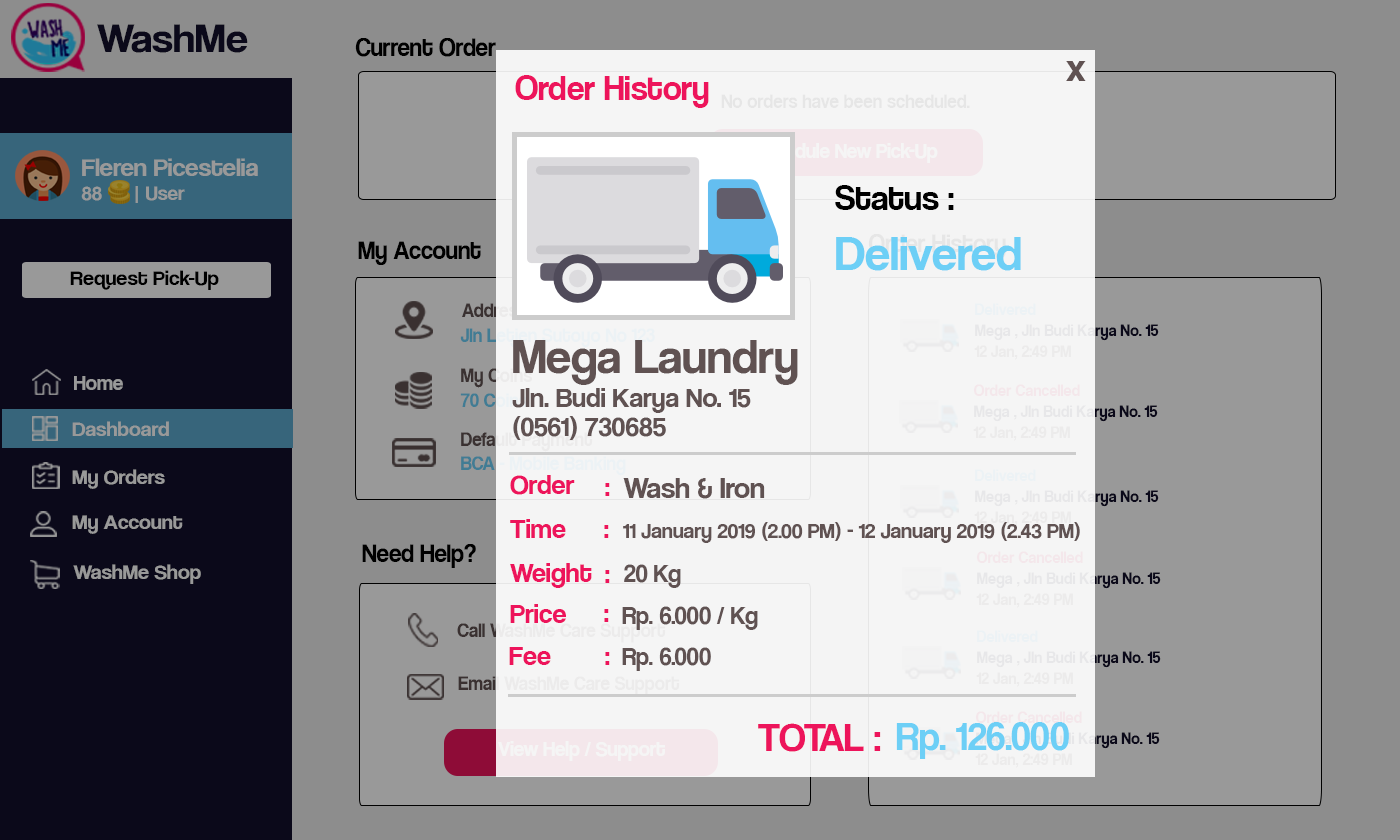
<style>
.page{position:relative;width:1400px;height:840px;background:#8d8d8d}
.page>*{position:absolute;margin:0}
.t1{font:42.1px "CoolveticaRg-Regular";color:#120f2b;scale:1.05 1}
.t2{font:25.5px "CoolveticaRg-Regular";color:#000000;scale:0.96 1}
.t3{font:40px "CoolveticaRg-Regular";color:#605252}
.t4{font:35px "CoolveticaRg-Regular";color:#ed145b}
.t5{font:19.9px "CoolveticaRg-Regular";color:#e6e6e6;scale:0.96 1}
.t6{font:21.3px "CoolveticaRg-Regular";color:#ffffff;scale:0.96 1}
.t7{font:25.2px "CoolveticaRg-Regular";color:#999999;scale:1.05 1}
.t8{font:20px "CoolveticaRg-Regular";color:#999999;scale:1.05 1}
.t9{font:50px "CoolveticaRg-Regular";color:#6dcff6}
.t10{font:36px "CoolveticaRg-Regular";color:#000000}
.t11{font:25.5px "CoolveticaRg-Regular";scale:0.96 1}
.t12{font:21px "CoolveticaRg-Regular";color:#000000;scale:1.05 1}
.t13{font:19.9px "CoolveticaRg-Regular";scale:0.96 1}
.t14{font:17px "CoolveticaRg-Regular";color:#ecf2f5;scale:0.96 1}
.t15{font:50px "CoolveticaRg-Regular";color:#605252}
.t16{font:17px "CoolveticaRg-Regular";color:#ecebeb;scale:0.96 1}
.t17{font:21px "CoolveticaRg-Regular";color:#999999}
.t18{font:28px "CoolveticaRg-Regular";color:#605252}
.t19{font:17px "CoolveticaRg-Regular";color:#f4e7eb;scale:0.96 1}
.t20{font:21px "CoolveticaRg-Regular";color:#999999;scale:1.05 1}
.t21{font:28px "CoolveticaRg-Regular";color:#ed145b}
.t22{font:30px "CoolveticaRg-Regular";color:#605252}
.t23{font:21.7px "CoolveticaRg-Regular";color:#605252}
.t24{font:25px "CoolveticaRg-Regular";color:#605252}
.t25{font:40px "CoolveticaRg-Regular";color:#ed145b}
.t26{font:40px "CoolveticaRg-Regular";color:#6dcff6}
</style>
<div class="page">
<p class="t1" style="left:97px;top:24px;width:151px;height:29px">WashMe</p>
<p class="t2" style="left:355px;top:38px;width:141px;height:19px">Current Order</p>
<p class="t3" style="left:1066px;top:61px;width:20px;height:20px">x</p>
<p class="t4" style="left:515px;top:75px;width:194px;height:33px">Order History</p>
<p class="t5" style="left:721px;top:94px;width:249px;height:14px">No orders have been scheduled.</p>
<p class="t6" style="left:753px;top:143px;width:185px;height:20px">Schedule New Pick-Up</p>
<p class="t7" style="left:81px;top:158px;width:177px;height:45px">Fleren Picestelia<br><span class="t8">88      | User</span></p>
<p class="t9" style="left:835px;top:185px;width:186px;height:86px"><span class="t10">Status :<br></span>Delivered</p>
<p class="t2" style="left:358px;top:241px;width:123px;height:24px">My Account</p>
<p class="t11" style="left:868px;top:234px;width:138px;height:24px">Order History</p>
<p class="t12" style="left:70px;top:270px;width:149px;height:20px">Request Pick-Up</p>
<p class="t13" style="left:462px;top:303px;width:65px;height:14px">Address</p>
<p class="t14" style="left:975px;top:303px;width:61px;height:12px">Delivered</p>
<p class="t15" style="left:513px;top:340px;width:285px;height:45px">Mega Laundry</p>
<p class="t16" style="left:974px;top:345px;width:97px;height:15px">12 Jan, 2:49 PM</p>
<p class="t17" style="left:74px;top:376px;width:49px;height:14px">Home</p>
<p class="t13" style="left:461px;top:368px;width:71px;height:20px">My Coins</p>
<p class="t18" style="left:512px;top:388px;width:239px;height:25px">Jln. Budi Karya No. 15</p>
<p class="t19" style="left:973px;top:384px;width:107px;height:12px">Order Cancelled</p>
<p class="t20" style="left:72px;top:421px;width:97px;height:15px">Dashboard</p>
<p class="t18" style="left:513px;top:416px;width:153px;height:24px">(0561) 730685</p>
<p class="t16" style="left:973px;top:426px;width:97px;height:15px">12 Jan, 2:49 PM</p>
<p class="t20" style="left:72px;top:469px;width:93px;height:20px">My Orders</p>
<p class="t14" style="left:975px;top:469px;width:61px;height:12px">Delivered</p>
<p class="t21" style="left:510px;top:475px;width:65px;height:20px">Order</p>
<p class="t21" style="left:605px;top:483px;width:5px;height:13px">:</p>
<p class="t22" style="left:623px;top:478px;width:142px;height:21px">Wash &amp; Iron</p>
<p class="t20" style="left:72px;top:515px;width:111px;height:19px">My Account</p>
<p class="t21" style="left:510px;top:519px;width:56px;height:19px">Time</p>
<p class="t21" style="left:604px;top:525px;width:5px;height:13px">:</p>
<p class="t23" style="left:623px;top:522px;width:457px;height:21px">11 January 2019 (2.00 PM) - 12 January 2019 (2.43 PM)</p>
<p class="t2" style="left:362px;top:544px;width:114px;height:24px">Need Help?</p>
<p class="t19" style="left:976px;top:551px;width:107px;height:12px">Order Cancelled</p>
<p class="t20" style="left:73px;top:564px;width:128px;height:20px">WashMe Shop</p>
<p class="t21" style="left:510px;top:563px;width:82px;height:25px">Weight</p>
<p class="t24" style="left:624px;top:564px;width:57px;height:24px">20 Kg</p>
<p class="t21" style="left:605px;top:570px;width:5px;height:13px">:</p>
<p class="t16" style="left:976px;top:593px;width:97px;height:15px">12 Jan, 2:49 PM</p>
<p class="t21" style="left:510px;top:604px;width:56px;height:19px">Price</p>
<p class="t24" style="left:622px;top:606px;width:136px;height:24px">Rp. 6.000 / Kg</p>
<p class="t21" style="left:604px;top:609px;width:5px;height:13px">:</p>
<p class="t14" style="left:977px;top:630px;width:61px;height:12px">Delivered</p>
<p class="t21" style="left:509px;top:647px;width:42px;height:18px">Fee</p>
<p class="t21" style="left:605px;top:652px;width:5px;height:13px">:</p>
<p class="t24" style="left:622px;top:647px;width:89px;height:24px">Rp. 6.000</p>
<p class="t16" style="left:976px;top:672px;width:97px;height:15px">12 Jan, 2:49 PM</p>
<p class="t19" style="left:975px;top:711px;width:107px;height:12px">Order Cancelled</p>
<p class="t25" style="left:758px;top:723px;width:123px;height:29px">TOTAL :</p>
<p class="t26" style="left:896px;top:722px;width:173px;height:37px">Rp. 126.000</p>
<p class="t6" style="left:498px;top:741px;width:167px;height:20px">View Help / Support</p>
<p class="t16" style="left:975px;top:753px;width:97px;height:15px">12 Jan, 2:49 PM</p>
</div>
